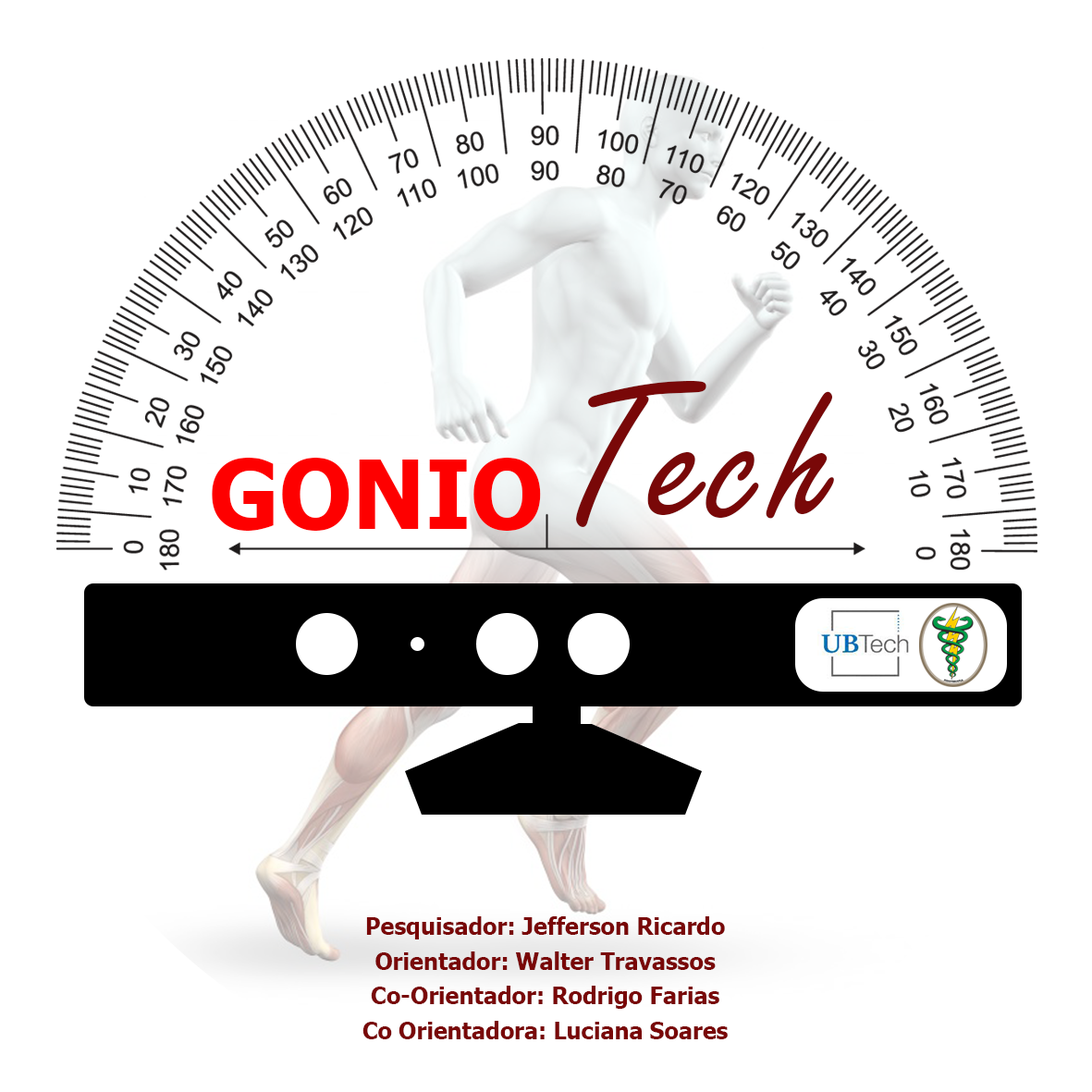
<style>
.page{position:relative;width:1092px;height:1092px;background:#ffffff}
.page>*{position:absolute;margin:0}
.t1{font:212.1px "FreestyleScript-Regular";color:#790808}
.t2{font:94.8px "Tahoma-Bold";color:#fe0000}
.t3{font:23.1px/34.7px "Tahoma-Bold";color:#790808}
</style>
<div class="page">
<p class="t1" style="left:576px;top:381px;width:258px;height:146px">Tech</p>
<p class="t2" style="left:212px;top:458px;width:329px;height:73px">GONIO</p>
<p class="t3" style="left:362px;top:916px;width:366px;height:123px;text-align:center">Pesquisador: Jefferson Ricardo<br>Orientador: Walter Travassos<br>Co-Orientador: Rodrigo Farias<br>Co Orientadora: Luciana Soares</p>
</div>
